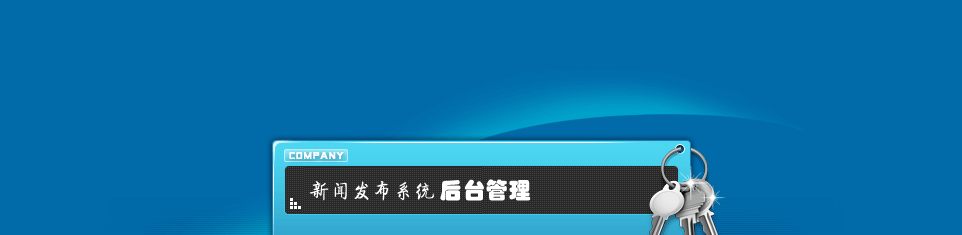
<style>
.page{position:relative;width:962px;height:235px;background:#016aa9}
.page>*{position:absolute;margin:0}
.t1{font:20px "JQiTi";letter-spacing:0.05em;color:#ffffff}
.t2{font:22px "STHupo";letter-spacing:0.05em;color:#ffffff}
</style>
<div class="page">
<p class="t1" style="left:309px;top:181px;width:125px;height:20px">新闻发布系统</p>
<p class="t2" style="left:440px;top:179px;width:91px;height:22px">后台管理</p>
</div>
